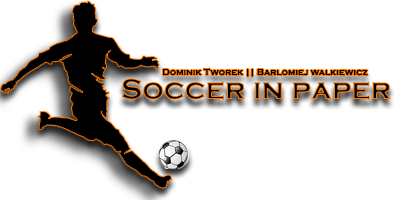
<style>
.page{position:relative;width:400px;height:200px;background:#ffffff}
.page>*{position:absolute;margin:0}
.t1{font:30px "CopperplateGothic-Bold"}
.t2{font:9px "CopperplateGothic-Bold";color:#000000}
</style>
<div class="page">
<p class="t1" style="left:121px;top:78px;width:270px;height:22px">Soccer in paper</p>
<p class="t2" style="left:162px;top:68px;width:206px;height:9px">Dominik Tworek || Barlomiej walkiewicz</p>
</div>
